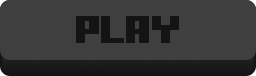
<style>
.page{position:relative;width:256px;height:76px;background:#3f3f3f}
.page>*{position:absolute;margin:0}
.t1{font:72px "Gamer";letter-spacing:-0.025em;color:#141414}
</style>
<div class="page">
<p class="t1" style="left:76px;top:16px;width:103px;height:27px">PLAY</p>
</div>
